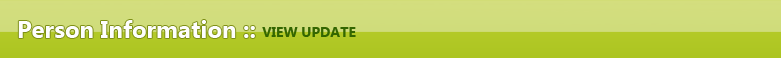
<style>
.page{position:relative;width:781px;height:58px}
.page>*{position:absolute;margin:0}
.t1{font:24px "SegoeUI-Bold";color:#fefefe}
.t2{font:14px "SegoeUI-Bold";color:#336600}
</style>
<div class="page">
<p class="t1" style="left:18px;top:20px;width:237px;height:18px">Person Information ::</p>
<p class="t2" style="left:262px;top:27px;width:94px;height:10px">VIEW UPDATE</p>
</div>
